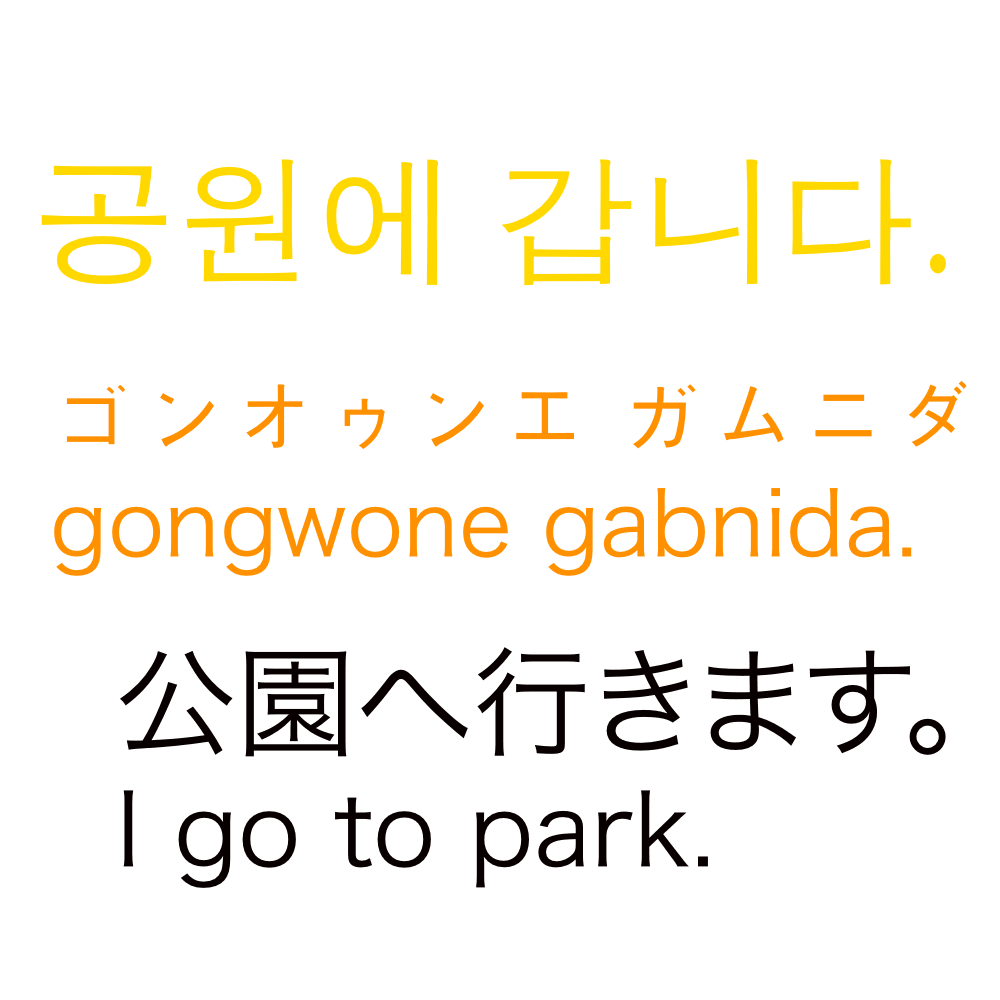
<style>
.page{position:relative;width:1000px;height:1000px;background:#ffffff}
.page>*{position:absolute;margin:0}
.t1{font:140px "AppleGothic";color:#ffd800}
.t2{font:90px "HiraKakuProN-W3";color:#ff9000}
.t3{font:90px "AppleGothic";color:#ff9000}
.t4{font:100px "HiraKakuProN-W3";color:#080000}
.t5{font:120px "HiraKakuProN-W3";color:#080000}
</style>
<div class="page">
<p class="t1" style="left:41px;top:159px;width:905px;height:127px">공원에 갑니다.</p>
<p class="t2" style="left:54px;top:381px;width:913px;height:195px"><span class="t3">ゴンオゥンエ ガムニダ<br></span>gongwone gabnida.</p>
<p class="t4" style="left:120px;top:647px;width:826px;height:241px"><span class="t5">公園へ行きます。<br></span>I go to park.</p>
</div>
